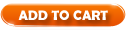
<style>
.page{position:relative;width:126px;height:30px;background:#ffffff}
.page>*{position:absolute;margin:0}
.t1{font:14px "BerlinSansFBDemi-Bold";color:#ffffff;text-transform:uppercase}
</style>
<div class="page">
<p class="t1" style="left:18px;top:10px;width:90px;height:10px">Add to Cart</p>
</div>
